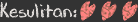
<style>
.page{position:relative;width:138px;height:22px;background:#333333}
.page>*{position:absolute;margin:0}
.t1{font:20px "DJBChalkItUp";color:#d6d2d0}
</style>
<div class="page">
<p class="t1" style="left:0px;top:2px;width:77px;height:16px">Kesulitan:</p>
</div>
